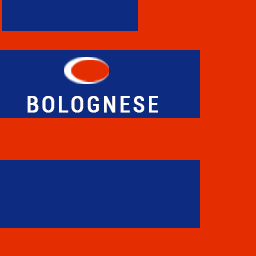
<style>
.page{position:relative;width:256px;height:256px;background:#e52d02}
.page>*{position:absolute;margin:0}
.t1{font:22.4px "Roboto-Condensed";letter-spacing:0.1em;color:#ffffff;font-weight:bold}
</style>
<div class="page">
<p class="t1" style="left:27px;top:96px;width:131px;height:17px">BOLOGNESE</p>
</div>
